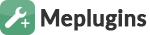
<style>
.page{position:relative;width:150px;height:35px;background:#ffffff}
.page>*{position:absolute;margin:0}
.t1{font:22px "Lato-Bold";color:#333333;font-weight:bold}
</style>
<div class="page">
<p class="t1" style="left:41px;top:9px;width:106px;height:22px">Meplugins</p>
</div>
